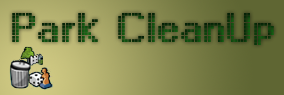
<style>
.page{position:relative;width:284px;height:95px}
.page>*{position:absolute;margin:0}
.t1{font:42px "DisplayOTF"}
</style>
<div class="page">
<p class="t1" style="left:12px;top:13px;width:262px;height:32px">Park CleanUp</p>
</div>
